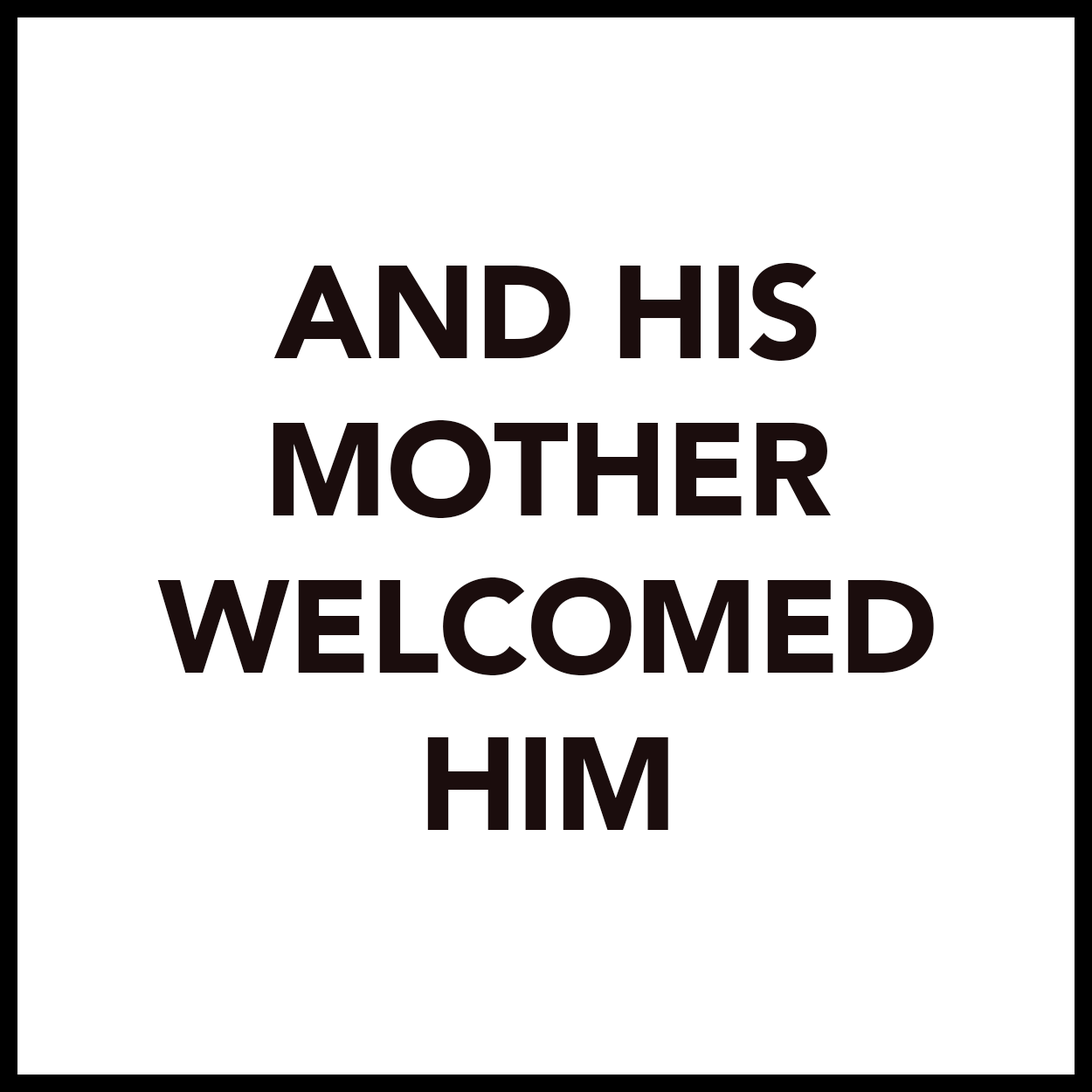
<style>
.page{position:relative;width:1092px;height:1092px;background:#ffffff}
.page>*{position:absolute;margin:0}
.t1{font:131px "Avenir-Black";letter-spacing:-0.01em;color:#1b0d0d}
</style>
<div class="page">
<p class="t1" style="left:157px;top:263px;width:777px;height:567px;text-align:center">AND HIS<br>MOTHER<br>WELCOMED<br>HIM</p>
</div>
